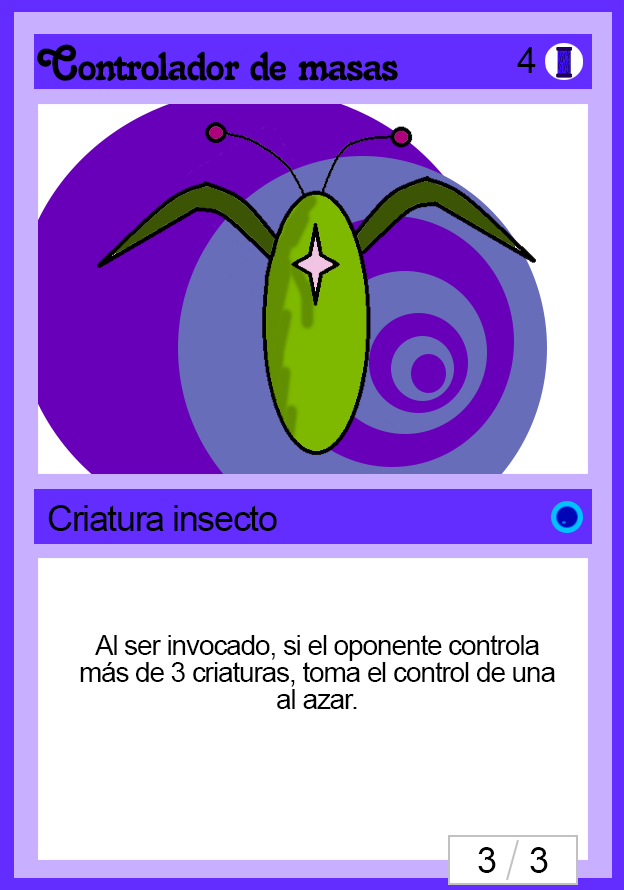
<style>
.page{position:relative;width:624px;height:890px;background:#ffffff}
.page>*{position:absolute;margin:0}
.t1{font:48px "Salina";letter-spacing:-0.04em;color:#000000}
.t2{font:36px "ArialMT";letter-spacing:-0.04em;color:#000000}
.t3{font:28px/27px "ArialMT";letter-spacing:-0.04em;color:#000000}
</style>
<div class="page">
<p class="t1" style="left:37px;top:44px;width:361px;height:37px">Controlador de masas</p>
<p class="t2" style="left:517px;top:47px;width:19px;height:26px">4</p>
<p class="t2" style="left:48px;top:505px;width:229px;height:26px">Criatura insecto</p>
<p class="t3" style="left:80px;top:635px;width:475px;height:74px;text-align:center">Al ser invocado, si el oponente controla más de 3 criaturas, toma el control de una al azar.</p>
<p class="t2" style="left:478px;top:847px;width:70px;height:26px">3    3</p>
</div>
